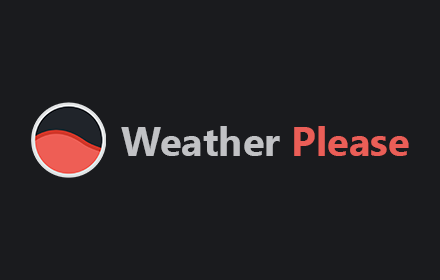
<style>
.page{position:relative;width:440px;height:280px;background:#1a1b1e}
.page>*{position:absolute;margin:0}
.t1{font:40px "SegoeUI-Bold";color:#c1c2c5}
.t2{font:40px "SegoeUI-Bold";color:#ea5e57}
</style>
<div class="page">
<p class="t1" style="left:121px;top:126px;width:288px;height:30px">Weather <span class="t2">Please</span></p>
</div>
